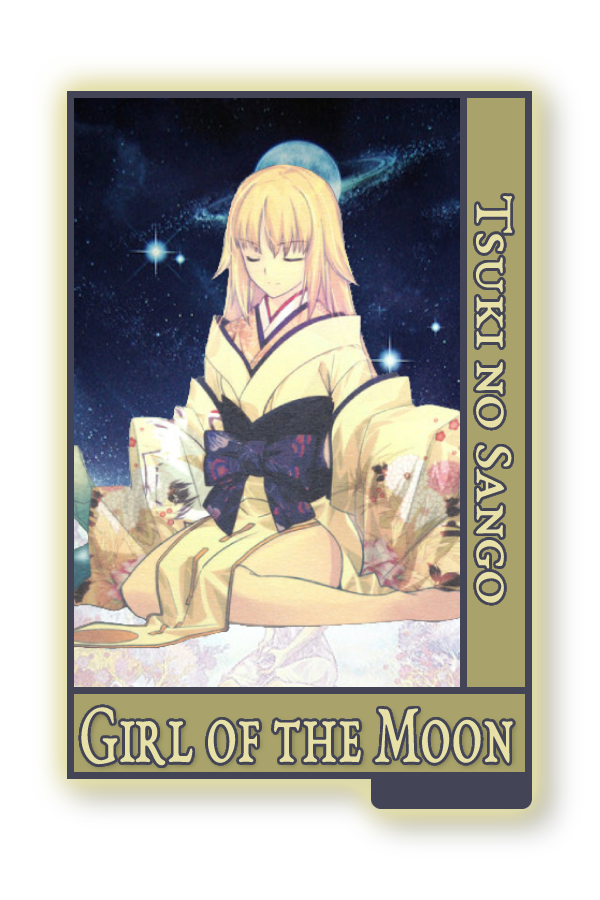
<style>
.page{position:relative;width:600px;height:900px;background:#ffffff}
.page>*{position:absolute;margin:0}
.t1{font:57.9px "EBGaramondSC08-Regular";color:#e7e1a8;scale:1.1 1}
.t2{font:90px "EBGaramondSC08-Regular";color:#e7e1a8;scale:0.62 1}
</style>
<div class="page">
<p class="t1" style="left:475px;top:196px;width:38px;height:407px;rotate:90deg">Tsuki no Sango</p>
<p class="t2" style="left:81px;top:707px;width:432px;height:59px">Girl of the Moon</p>
</div>
